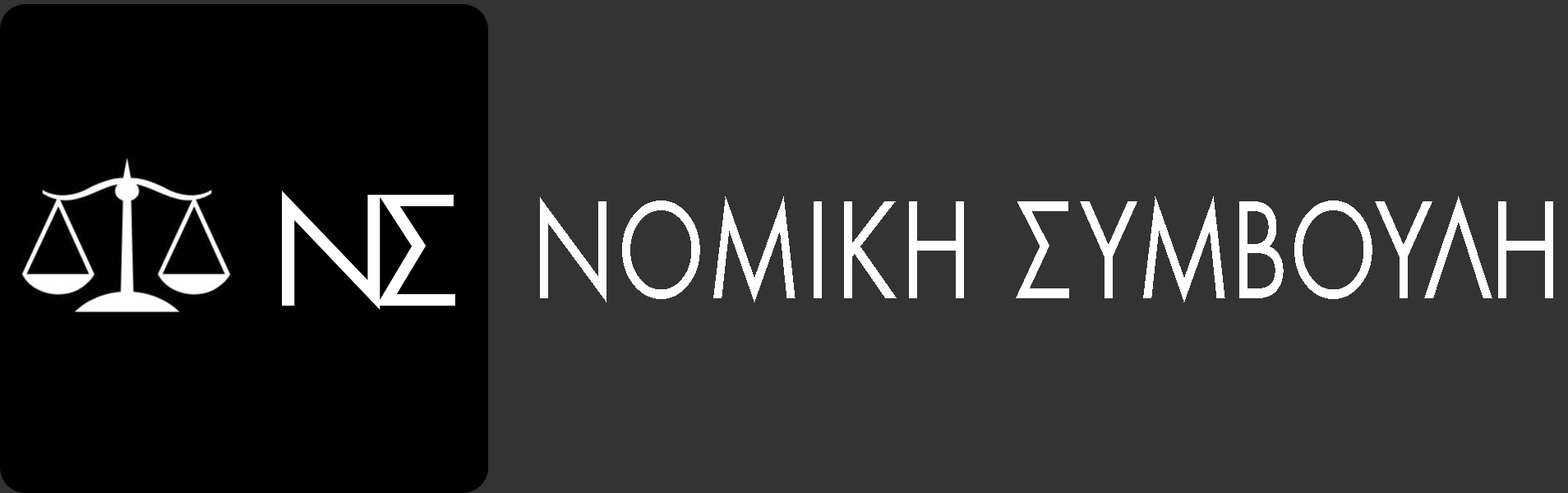
<style>
.page{position:relative;width:1568px;height:493px;background:#333333}
.page>*{position:absolute;margin:0}
.t1{font:140px "MgFutureUCPolNormal";letter-spacing:0.04em;color:#ffffff;font-variant:small-caps;scale:0.77 1}
</style>
<div class="page">
<p class="t1" style="left:540px;top:196px;width:1013px;height:106px">ΝΟΜΙΚΗ ΣΥΜΒΟΥΛΗ</p>
</div>
